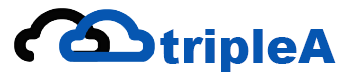
<style>
.page{position:relative;width:349px;height:72px;background:#ffffff}
.page>*{position:absolute;margin:0}
.t1{font:48px "Arial-Black";color:#0656b1}
</style>
<div class="page">
<p class="t1" style="left:160px;top:29px;width:176px;height:43px">tripleA</p>
</div>
